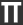
<style>
.page{position:relative;width:23px;height:25px;background:#333333}
.page>*{position:absolute;margin:0}
.t1{font:38.9px "AndaleMono";color:#ffffff;font-weight:bold;scale:0.9 1}
</style>
<div class="page">
<p class="t1" style="left:1px;top:2px;width:21px;height:21px;rotate:180deg">π</p>
</div>
